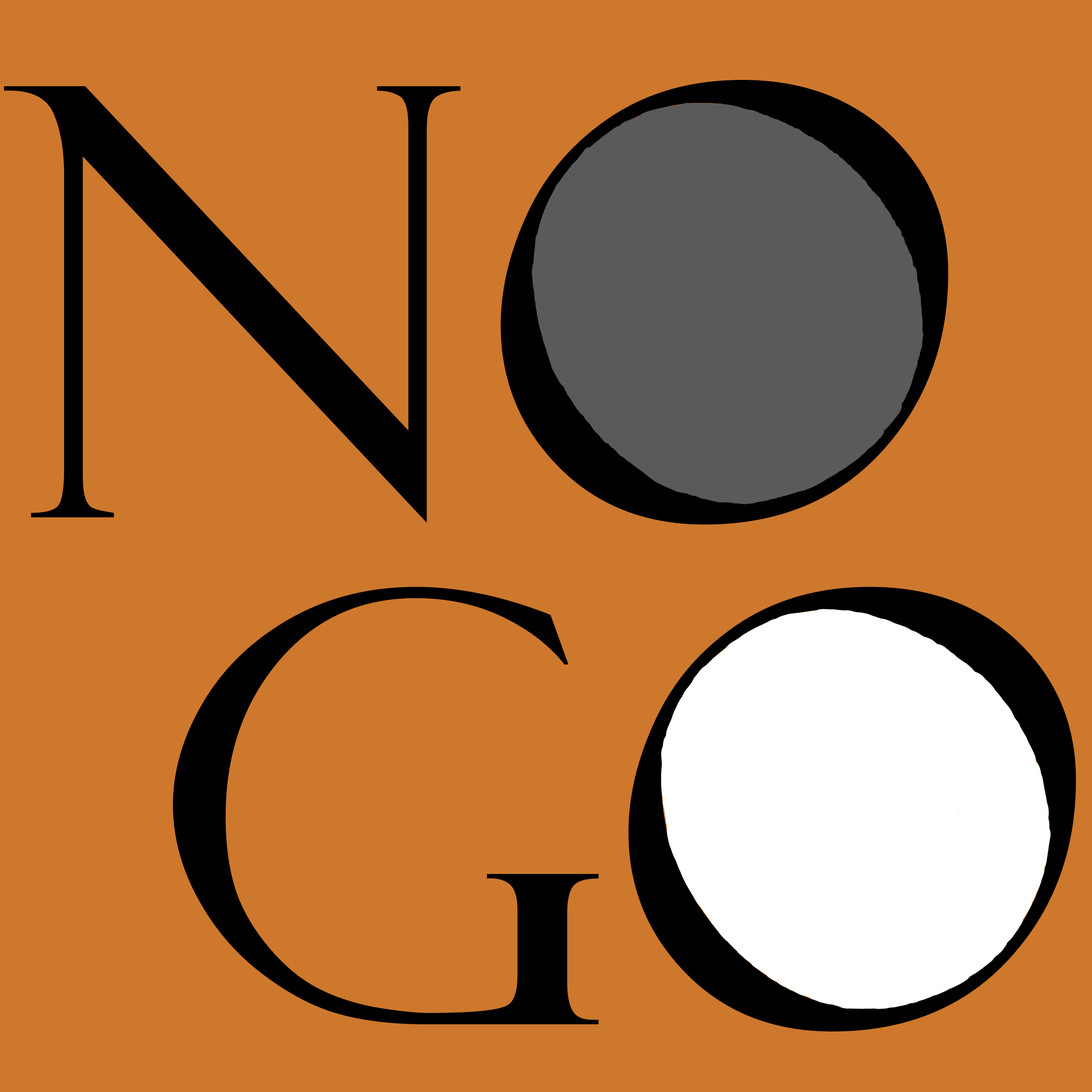
<style>
.page{position:relative;width:1092px;height:1092px;background:#cd782d}
.page>*{position:absolute;margin:0}
.t1{font:599.5px "FelixTitlingMT";color:#000000}
</style>
<div class="page">
<p class="t1" style="left:4px;top:80px;width:944px;height:445px">No</p>
<p class="t1" style="left:173px;top:587px;width:903px;height:444px">Go</p>
</div>
